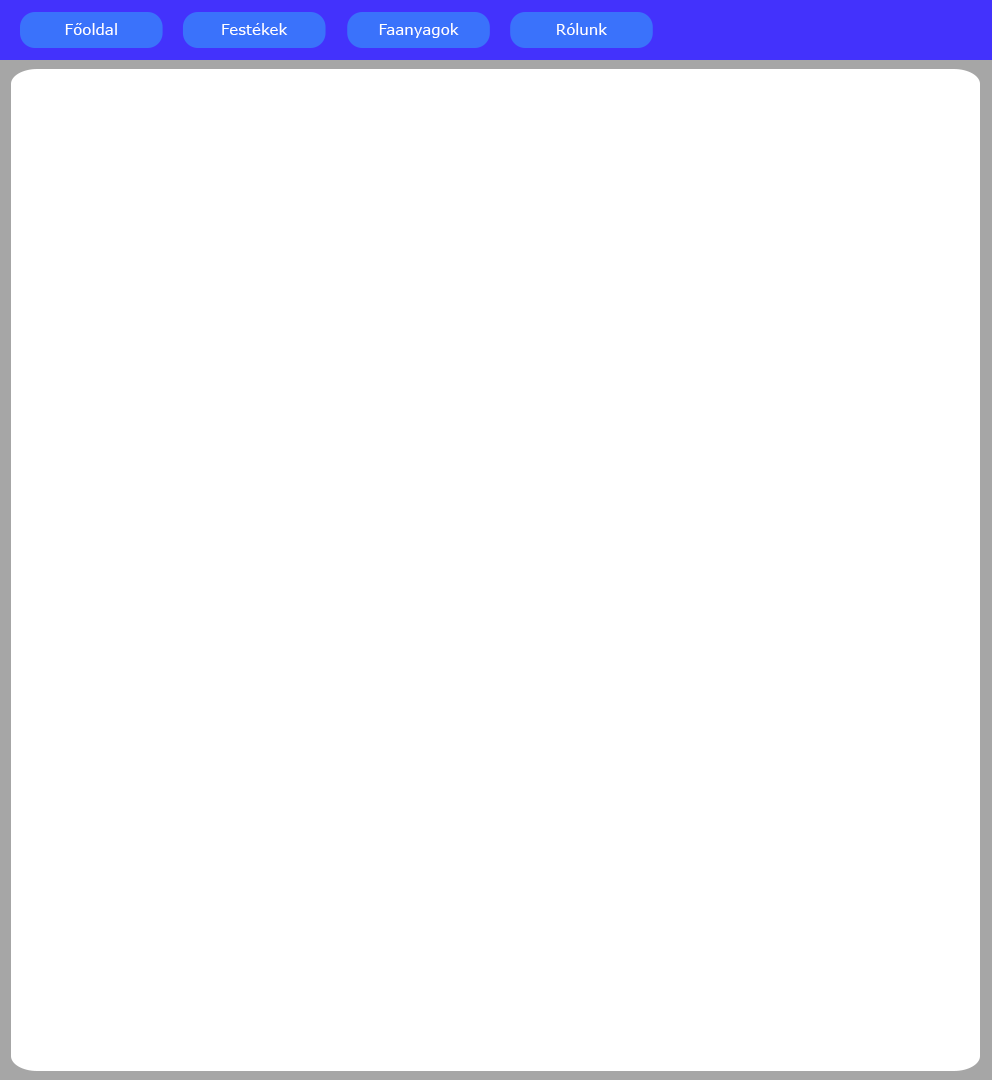
<style>
.page{position:relative;width:992px;height:1080px;background:#ffffff}
.page>*{position:absolute;margin:0}
.t1{font:15px "Verdana";color:#ffffff}
</style>
<div class="page">
<p class="t1" style="left:65px;top:23px;width:52px;height:12px">Főoldal</p>
<p class="t1" style="left:222px;top:23px;width:66px;height:12px">Festékek</p>
<p class="t1" style="left:379px;top:23px;width:80px;height:15px">Faanyagok</p>
<p class="t1" style="left:557px;top:23px;width:50px;height:12px">Rólunk</p>
</div>
